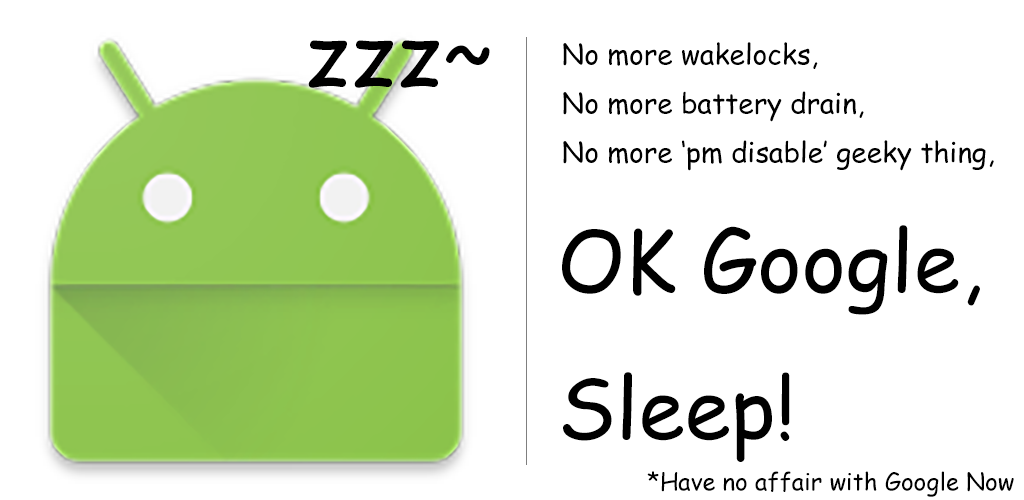
<style>
.page{position:relative;width:1024px;height:500px;background:#ffffff}
.page>*{position:absolute;margin:0}
.t1{font:85.5px "ComicSansMS";color:#000000}
.t2{font:28px "ComicSansMS";color:#000000}
.t3{font:84px "ComicSansMS";color:#000000}
.t4{font:24px "ComicSansMS";color:#000000}
</style>
<div class="page">
<p class="t1" style="left:308px;top:40px;width:182px;height:48px">zzz~</p>
<p class="t2" style="left:563px;top:42px;width:431px;height:129px">No more wakelocks,<br>No more battery drain,<br>No more ‘pm disable’ geeky thing,</p>
<p class="t3" style="left:562px;top:225px;width:418px;height:237px">OK Google,<br>Sleep!</p>
<p class="t4" style="left:647px;top:471px;width:367px;height:26px">*Have no affair with Google Now</p>
</div>
